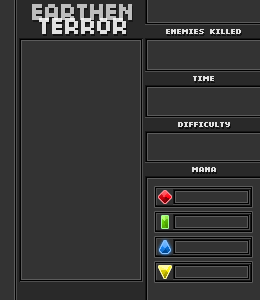
<style>
.page{position:relative;width:260px;height:300px;background:#333333}
.page>*{position:absolute;margin:0}
.t1{font:24px "04b03";color:#bdbdbd;font-weight:bold}
.t2{font:24px "04b03";color:#e0e0e0;font-weight:bold}
.t3{font:8px "04b03";color:#e0e0e0;font-weight:bold}
</style>
<div class="page">
<p class="t1" style="left:32px;top:4px;width:100px;height:16px">EARTHEN</p>
<p class="t2" style="left:39px;top:18px;width:87px;height:16px">TERROR</p>
<p class="t3" style="left:166px;top:29px;width:75px;height:5px">ENEMIES KILLED</p>
<p class="t3" style="left:193px;top:76px;width:21px;height:5px">TIME</p>
<p class="t3" style="left:178px;top:122px;width:52px;height:5px">DIFFICULTY</p>
<p class="t3" style="left:192px;top:167px;width:24px;height:5px">MANA</p>
</div>
